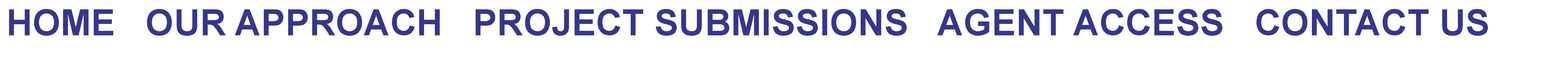
<style>
.page{position:relative;width:1568px;height:61px;background:#ffffff}
.page>*{position:absolute;margin:0}
.t1{font:36.3px "Arial-BoldMT";color:#35378c}
</style>
<div class="page">
<p class="t1" style="left:9px;top:9px;width:1479px;height:27px">HOME   OUR APPROACH   PROJECT SUBMISSIONS   AGENT ACCESS   CONTACT US</p>
</div>
